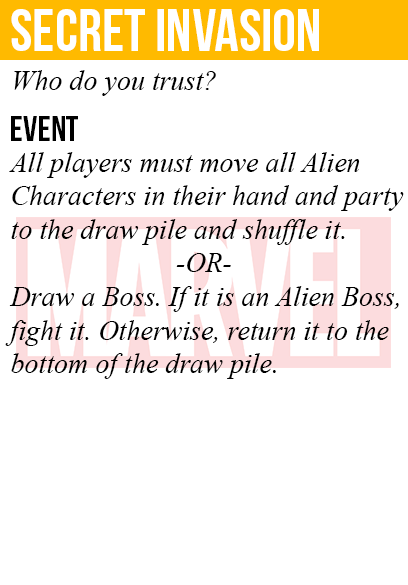
<style>
.page{position:relative;width:408px;height:585px;background:#ffffff}
.page>*{position:absolute;margin:0}
.t1{font:60px "BebasNeue";color:#ffffff}
.t2{font:28px "TimesNewRomanPS-ItalicMT";color:#000000}
.t3{font:36px "BebasNeue";color:#000000}
</style>
<div class="page">
<p class="t1" style="left:11px;top:9px;width:308px;height:42px">secret invasion</p>
<p class="t2" style="left:14px;top:70px;width:202px;height:26px">Who do you trust?</p>
<p class="t3" style="left:11px;top:116px;width:67px;height:25px">event</p>
<p class="t2" style="left:5px;top:152px;width:399px;height:227px">All players must move all Alien<br>Characters in their hand and party<br>to the draw pile and shuffle it.<br><br>Draw a Boss. If it is an Alien Boss,<br>fight it. Otherwise, return it to the<br>bottom of the draw pile.</p>
<p class="t2" style="left:176px;top:253px;width:55px;height:19px">-OR-</p>
</div>
